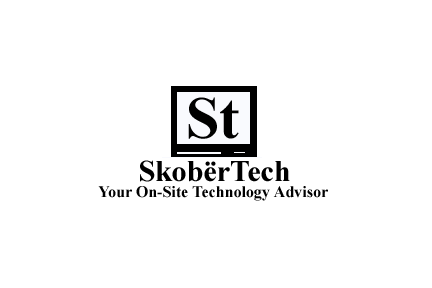
<style>
.page{position:relative;width:432px;height:288px;background:#ffffff}
.page>*{position:absolute;margin:0}
.t1{font:60px "TimesNewRomanPS-BoldMT";color:#000000}
.t2{font:30px "TimesNewRomanPS-BoldMT";color:#000000}
.t3{font:16px "TimesNewRomanPS-BoldMT";color:#000000}
</style>
<div class="page">
<p class="t1" style="left:188px;top:97px;width:51px;height:42px">St</p>
<p class="t2" style="left:140px;top:160px;width:150px;height:22px">SkobërTech</p>
<p class="t3" style="left:98px;top:186px;width:230px;height:15px">Your On-Site Technology Advisor</p>
</div>
